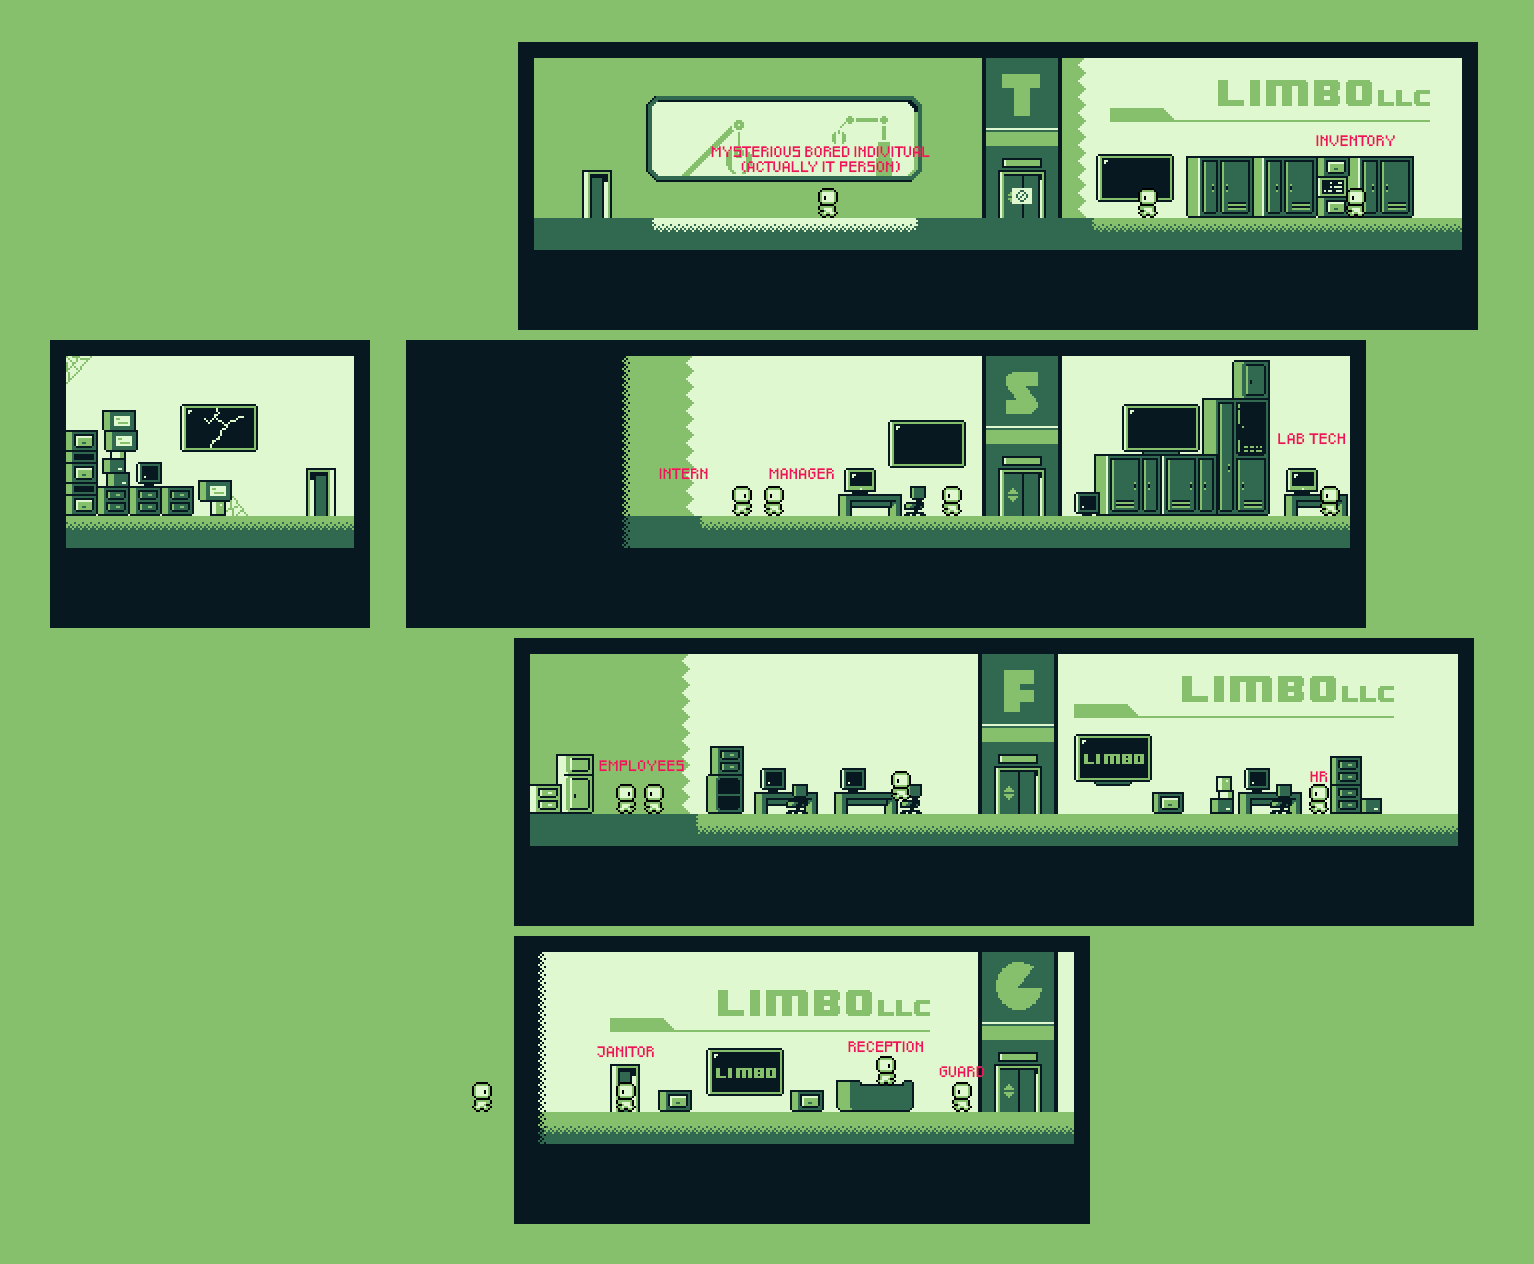
<style>
.page{position:relative;width:1534px;height:1264px;background:#86c06c}
.page>*{position:absolute;margin:0}
.t1{font:9px "Pixeled";color:#ed145b;text-transform:uppercase}
</style>
<div class="page">
<p class="t1" style="left:1316px;top:135px;width:79px;height:12px">inventory</p>
<p class="t1" style="left:711px;top:146px;width:219px;height:27px;text-align:center">mysterious bored indivitual<br>(actually IT person)</p>
<p class="t1" style="left:1278px;top:433px;width:68px;height:12px">lab tech</p>
<p class="t1" style="left:659px;top:468px;width:49px;height:12px">intern</p>
<p class="t1" style="left:769px;top:468px;width:65px;height:12px">manager</p>
<p class="t1" style="left:599px;top:760px;width:85px;height:12px">employees</p>
<p class="t1" style="left:1310px;top:771px;width:18px;height:12px">HR</p>
<p class="t1" style="left:597px;top:1046px;width:57px;height:12px">janitor</p>
<p class="t1" style="left:848px;top:1041px;width:76px;height:12px">reception</p>
<p class="t1" style="left:939px;top:1066px;width:45px;height:12px">guard</p>
</div>
